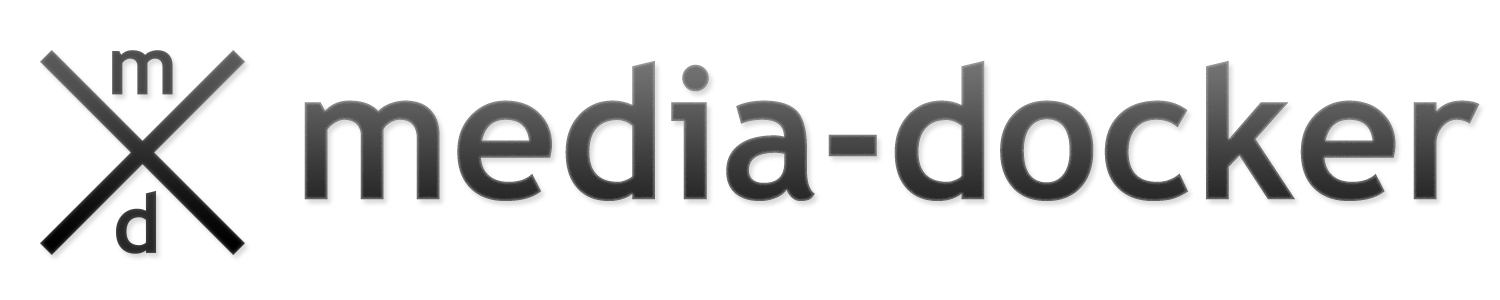
<style>
.page{position:relative;width:1500px;height:300px;background:#ffffff}
.page>*{position:absolute;margin:0}
.t1{font:185px "TrebuchetMS-Bold"}
</style>
<div class="page">
<p class="t1" style="left:304px;top:60px;width:1176px;height:141px">media-docker</p>
</div>
